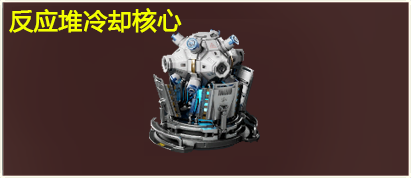
<style>
.page{position:relative;width:411px;height:178px}
.page>*{position:absolute;margin:0}
.t1{font:24px "MicrosoftYaHeiUI";color:#f4ff00;font-weight:bold}
</style>
<div class="page">
<p class="t1" style="left:9px;top:8px;width:173px;height:25px">反应堆冷却核心</p>
</div>
